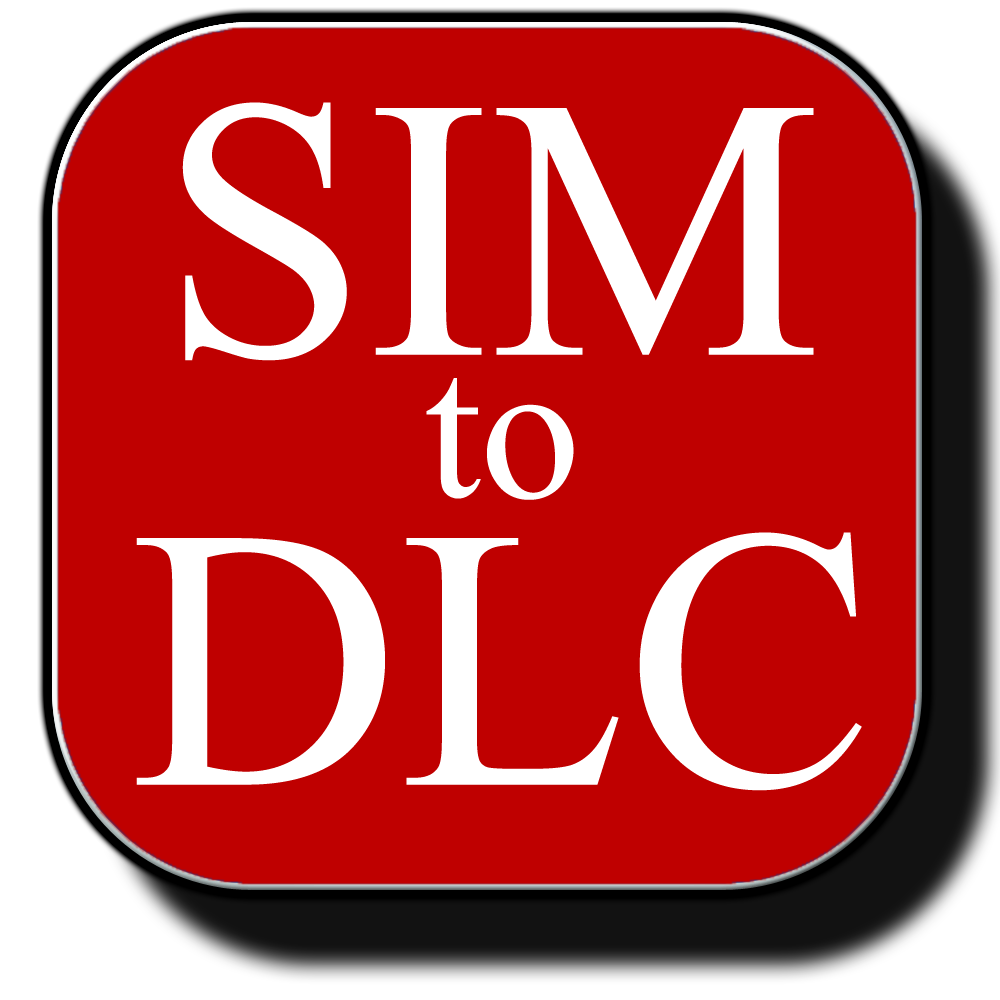
<style>
.page{position:relative;width:1000px;height:1000px;background:#bf0000}
.page>*{position:absolute;margin:0}
.t1{font:372px "TimesNewRomanPSMT";color:#ffffff}
.t2{font:200px "TimesNewRomanPSMT";color:#ffffff}
</style>
<div class="page">
<p class="t1" style="left:182px;top:102px;width:632px;height:259px">SIM</p>
<p class="t2" style="left:426px;top:378px;width:148px;height:122px">to</p>
<p class="t1" style="left:136px;top:532px;width:726px;height:259px">DLC</p>
</div>
